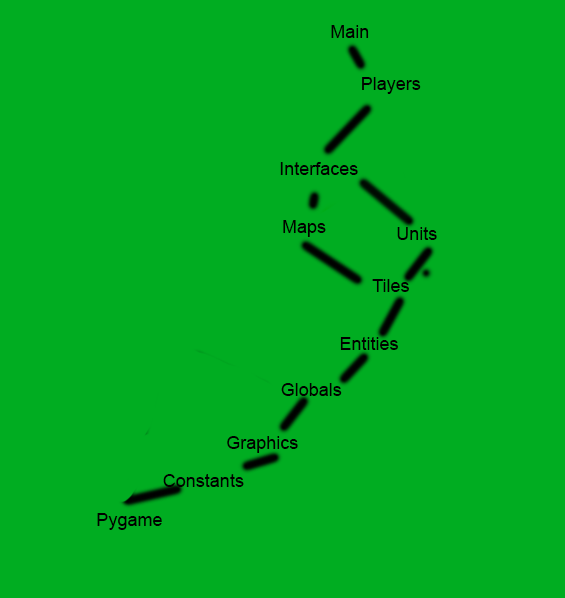
<style>
.page{position:relative;width:565px;height:598px;background:#00ad21}
.page>*{position:absolute;margin:0}
.t1{font:18px "ArialMT";color:#000000}
</style>
<div class="page">
<p class="t1" style="left:331px;top:25px;width:38px;height:13px">Main</p>
<p class="t1" style="left:362px;top:77px;width:59px;height:17px">Players</p>
<p class="t1" style="left:280px;top:162px;width:78px;height:13px">Interfaces</p>
<p class="t1" style="left:283px;top:220px;width:43px;height:17px">Maps</p>
<p class="t1" style="left:397px;top:227px;width:40px;height:13px">Units</p>
<p class="t1" style="left:372px;top:279px;width:37px;height:13px">Tiles</p>
<p class="t1" style="left:340px;top:337px;width:58px;height:13px">Entities</p>
<p class="t1" style="left:281px;top:383px;width:61px;height:13px">Globals</p>
<p class="t1" style="left:227px;top:436px;width:71px;height:17px">Graphics</p>
<p class="t1" style="left:163px;top:474px;width:81px;height:13px">Constants</p>
<p class="t1" style="left:97px;top:513px;width:65px;height:17px">Pygame</p>
</div>
